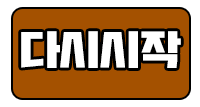
<style>
.page{position:relative;width:200px;height:107px;background:#a45100}
.page>*{position:absolute;margin:0}
.t1{font:41.7px "Typo_SsangmunDong_B";letter-spacing:-0.033em;color:#ffffff}
</style>
<div class="page">
<p class="t1" style="left:21px;top:31px;width:160px;height:37px">다시시작</p>
</div>
